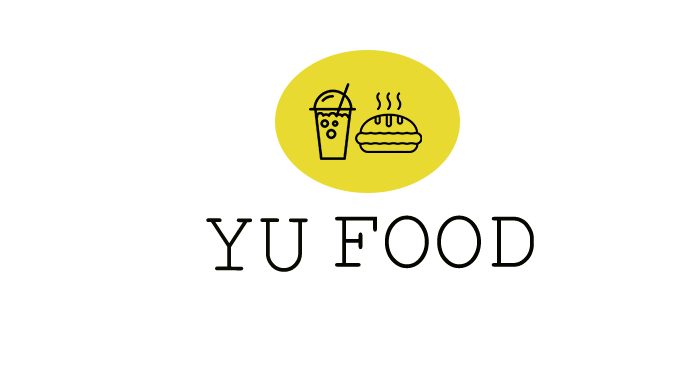
<style>
.page{position:relative;width:698px;height:386px;background:#ffffff}
.page>*{position:absolute;margin:0}
.t1{font:91px "CourierNewPSMT";color:#0a0a02}
.t2{font:87.1px "CourierNewPSMT";color:#060600}
.t3{font:87.1px "BookAntiqua";color:#e7d61e}
</style>
<div class="page">
<p class="t1" style="left:206px;top:218px;width:102px;height:54px">YU</p>
<p class="t2" style="left:335px;top:215px;width:199px;height:54px"><span class="t3"> </span>FOOD</p>
</div>
